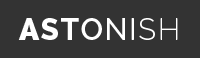
<style>
.page{position:relative;width:200px;height:58px;background:#333333}
.page>*{position:absolute;margin:0}
.t1{font:30px "Raleway-Heavy";letter-spacing:0.05em;color:#ffffff}
.t2{font:30px "Raleway-ExtraBold";letter-spacing:0.05em;color:#ffffff}
.t3{font:30px "Raleway-Bold";letter-spacing:0.05em;color:#ffffff}
.t4{font:30px "Raleway-SemiBold";letter-spacing:0.05em;color:#ffffff}
.t5{font:30px "Raleway-Medium";letter-spacing:0.05em;color:#ffffff}
.t6{font:30px "Raleway-Regular";letter-spacing:0.05em;color:#ffffff}
.t7{font:30px "Raleway-Light";letter-spacing:0.05em;color:#ffffff}
.t8{font:30px "Raleway-ExtraLight";letter-spacing:0.05em;color:#ffffff}
</style>
<div class="page">
<p class="t1" style="left:18px;top:18px;width:160px;height:22px">A<span class="t2">S</span><span class="t3">T</span><span class="t4">O</span><span class="t5">N</span><span class="t6">I</span><span class="t7">S</span><span class="t8">H</span></p>
</div>
